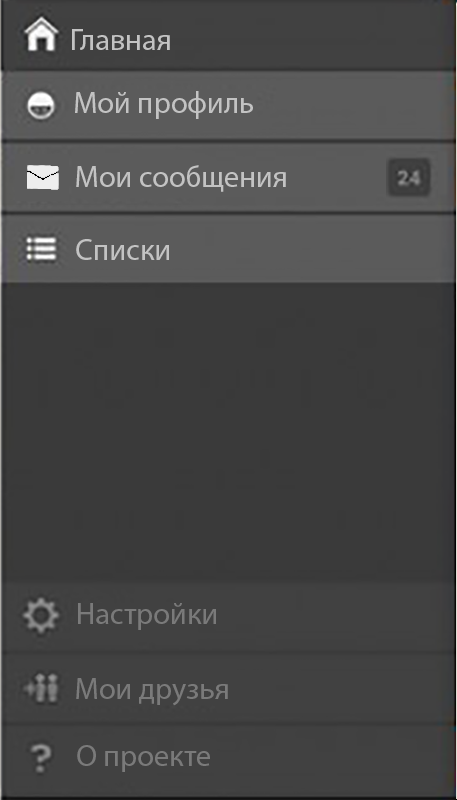
<style>
.page{position:relative;width:457px;height:800px;background:#3a3a3a}
.page>*{position:absolute;margin:0}
.t1{font:30.3px "MyriadPro-Regular";color:#c3c3c3}
.t2{font:30.3px "MyriadPro-Regular";color:#7a7a7a}
</style>
<div class="page">
<p class="t1" style="left:72px;top:29px;width:98px;height:21px">Главная</p>
<p class="t1" style="left:75px;top:91px;width:178px;height:28px">Мой профиль</p>
<p class="t1" style="left:76px;top:165px;width:210px;height:27px">Мои сообщения</p>
<p class="t1" style="left:76px;top:239px;width:93px;height:21px">Списки</p>
<p class="t2" style="left:78px;top:603px;width:138px;height:27px">Настройки</p>
<p class="t2" style="left:76px;top:678px;width:152px;height:28px">Мои друзья</p>
<p class="t2" style="left:77px;top:745px;width:133px;height:27px">О проекте</p>
</div>
